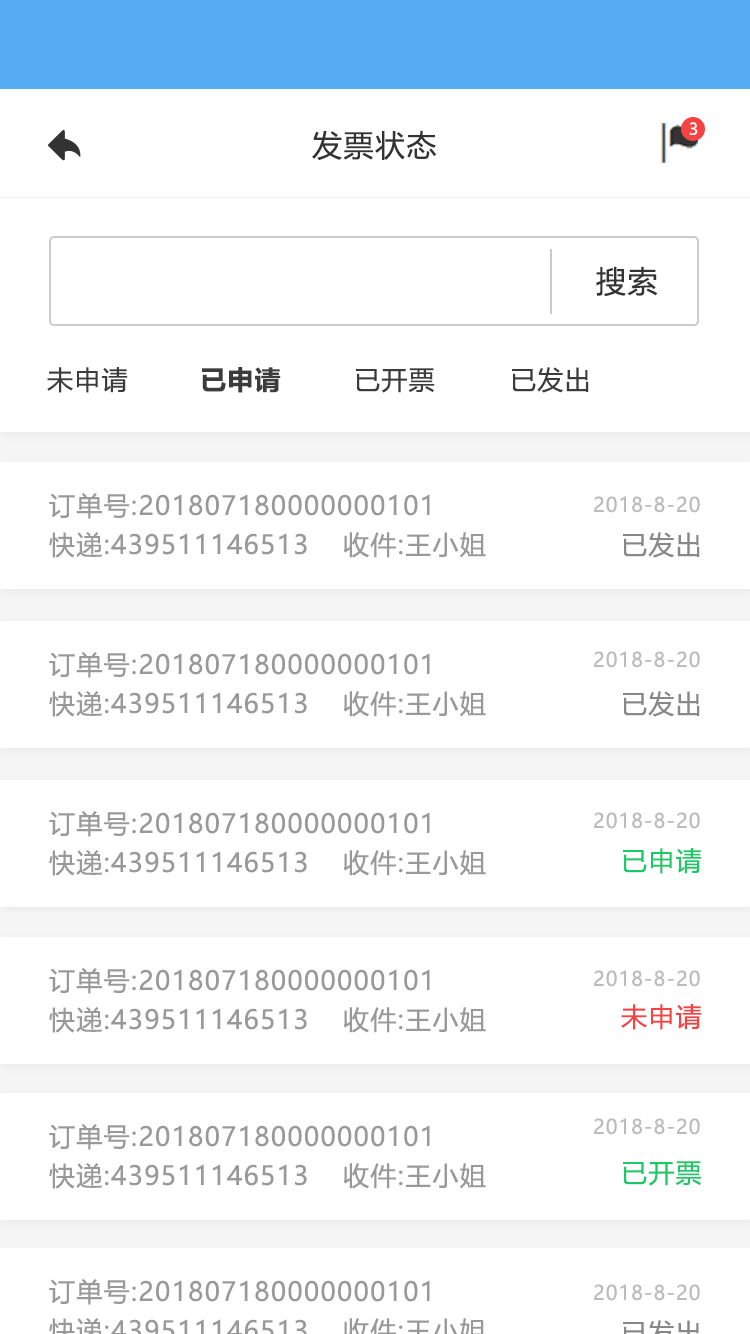
<style>
.page{position:relative;width:750px;height:1334px;background:#ffffff}
.page>*{position:absolute;margin:0}
.t1{font:16px "MicrosoftYaHeiUI";color:#ffffff}
.t2{font:30px "MicrosoftYaHeiUI";letter-spacing:0.05em;color:#333333}
.t3{font:26px "MicrosoftYaHeiUI";letter-spacing:0.05em;color:#3c3c3c}
.t4{font:26px "MicrosoftYaHeiUI-Bold";letter-spacing:0.05em;color:#3c3c3c}
.t5{font:26px "MicrosoftYaHeiUI";letter-spacing:0.05em;color:#999999}
.t6{font:20px "MicrosoftYaHeiUI";letter-spacing:0.05em;color:#bbbbbb}
.t7{font:26px "MicrosoftYaHeiUI";letter-spacing:0.05em;color:#888888}
.t8{font:26px "MicrosoftYaHeiUI";letter-spacing:0.05em;color:#1dc869}
.t9{font:26px "MicrosoftYaHeiUI";letter-spacing:0.05em;color:#f54343}
</style>
<div class="page">
<p class="t1" style="left:689px;top:122px;width:9px;height:13px">3</p>
<p class="t2" style="left:312px;top:130px;width:125px;height:30px">发票状态</p>
<p class="t2" style="left:596px;top:266px;width:62px;height:30px">搜索</p>
<p class="t3" style="left:47px;top:367px;width:81px;height:26px">未申请</p>
<p class="t4" style="left:202px;top:367px;width:79px;height:26px">已申请</p>
<p class="t3" style="left:356px;top:368px;width:79px;height:25px">已开票</p>
<p class="t3" style="left:512px;top:367px;width:77px;height:26px">已发出</p>
<p class="t5" style="left:49px;top:493px;width:381px;height:26px">订单号:201807180000000101</p>
<p class="t6" style="left:594px;top:496px;width:106px;height:17px">2018-8-20</p>
<p class="t5" style="left:49px;top:532px;width:258px;height:26px">快递:439511146513</p>
<p class="t5" style="left:343px;top:532px;width:143px;height:26px">收件:王小姐</p>
<p class="t7" style="left:623px;top:532px;width:77px;height:26px">已发出</p>
<p class="t5" style="left:49px;top:652px;width:381px;height:26px">订单号:201807180000000101</p>
<p class="t6" style="left:594px;top:651px;width:106px;height:17px">2018-8-20</p>
<p class="t5" style="left:49px;top:691px;width:258px;height:26px">快递:439511146513</p>
<p class="t5" style="left:343px;top:691px;width:143px;height:26px">收件:王小姐</p>
<p class="t7" style="left:623px;top:691px;width:77px;height:26px">已发出</p>
<p class="t5" style="left:49px;top:811px;width:381px;height:26px">订单号:201807180000000101</p>
<p class="t6" style="left:594px;top:812px;width:106px;height:17px">2018-8-20</p>
<p class="t5" style="left:49px;top:850px;width:258px;height:26px">快递:439511146513</p>
<p class="t5" style="left:343px;top:850px;width:143px;height:26px">收件:王小姐</p>
<p class="t8" style="left:623px;top:848px;width:79px;height:26px">已申请</p>
<p class="t5" style="left:49px;top:968px;width:381px;height:26px">订单号:201807180000000101</p>
<p class="t6" style="left:594px;top:970px;width:106px;height:17px">2018-8-20</p>
<p class="t5" style="left:49px;top:1007px;width:258px;height:26px">快递:439511146513</p>
<p class="t5" style="left:343px;top:1007px;width:143px;height:26px">收件:王小姐</p>
<p class="t9" style="left:621px;top:1004px;width:81px;height:26px">未申请</p>
<p class="t6" style="left:594px;top:1118px;width:106px;height:17px">2018-8-20</p>
<p class="t5" style="left:49px;top:1124px;width:381px;height:26px">订单号:201807180000000101</p>
<p class="t5" style="left:49px;top:1163px;width:258px;height:26px">快递:439511146513</p>
<p class="t5" style="left:343px;top:1163px;width:143px;height:26px">收件:王小姐</p>
<p class="t8" style="left:623px;top:1161px;width:79px;height:25px">已开票</p>
<p class="t5" style="left:49px;top:1279px;width:381px;height:26px">订单号:201807180000000101</p>
<p class="t6" style="left:594px;top:1284px;width:106px;height:17px">2018-8-20</p>
</div>
